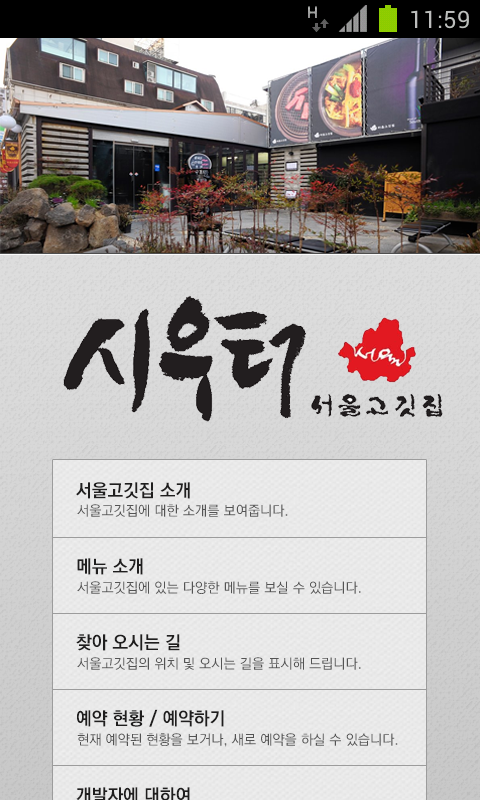
<style>
.page{position:relative;width:480px;height:800px}
.page>*{position:absolute;margin:0}
.t1{font:18px "KoPubDotumPB";color:#1f1e1e}
.t2{font:14px "KoPubDotumPM";color:#545454}
</style>
<div class="page">
<p class="t1" style="left:76px;top:482px;width:114px;height:17px">서울고깃집 소개</p>
<p class="t2" style="left:77px;top:504px;width:211px;height:13px">서울고깃집에 대한 소개를 보여줍니다.</p>
<p class="t1" style="left:77px;top:558px;width:66px;height:17px">메뉴 소개</p>
<p class="t2" style="left:77px;top:581px;width:284px;height:13px">서울고깃집에 있는 다양한 메뉴를 보실 수 있습니다.</p>
<p class="t1" style="left:76px;top:634px;width:104px;height:17px">찾아 오시는 길</p>
<p class="t2" style="left:77px;top:657px;width:284px;height:13px">서울고깃집의 위치 및 오시는 길을 표시해 드립니다.</p>
<p class="t1" style="left:77px;top:709px;width:147px;height:18px">예약 현황 / 예약하기</p>
<p class="t2" style="left:77px;top:733px;width:321px;height:14px">현재 예약된 현황을 보거나, 새로 예약을 하실 수 있습니다.</p>
</div>
